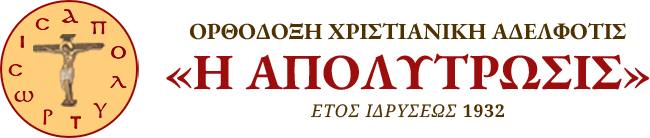
<style>
.page{position:relative;width:650px;height:138px;background:#ffffff}
.page>*{position:absolute;margin:0}
.t1{font:23.1px "EBGaramond-Bold";color:#4f3200}
.t2{font:50.6px "EBGaramond-Bold";color:#9c0d0d}
.t3{font:17.6px "NotoSerif-Italic";letter-spacing:0.05em;color:#4f3200}
.t4{font:17.6px "NotoSerif-Bold";letter-spacing:0.05em;color:#4f3200}
</style>
<div class="page">
<p class="t1" style="left:190px;top:22px;width:436px;height:18px">ΟΡΘΟΔΟΞΗ ΧΡΙΣΤΙΑΝΙΚΗ ΑΔΕΛΦΟΤΙΣ</p>
<p class="t2" style="left:166px;top:53px;width:483px;height:37px">«H AΠΟΛΥΤΡΩΣΙΣ»</p>
<p class="t3" style="left:311px;top:104px;width:193px;height:14px">ΕΤΟΣ ΙΔΡΥΣΕΩΣ <span class="t4">1932</span></p>
</div>
